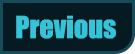
<style>
.page{position:relative;width:135px;height:54px;background:#051a21}
.page>*{position:absolute;margin:0}
.t1{font:28.2px "Impact";color:#34c3d9}
</style>
<div class="page">
<p class="t1" style="left:16px;top:15px;width:100px;height:24px">Previous</p>
</div>
